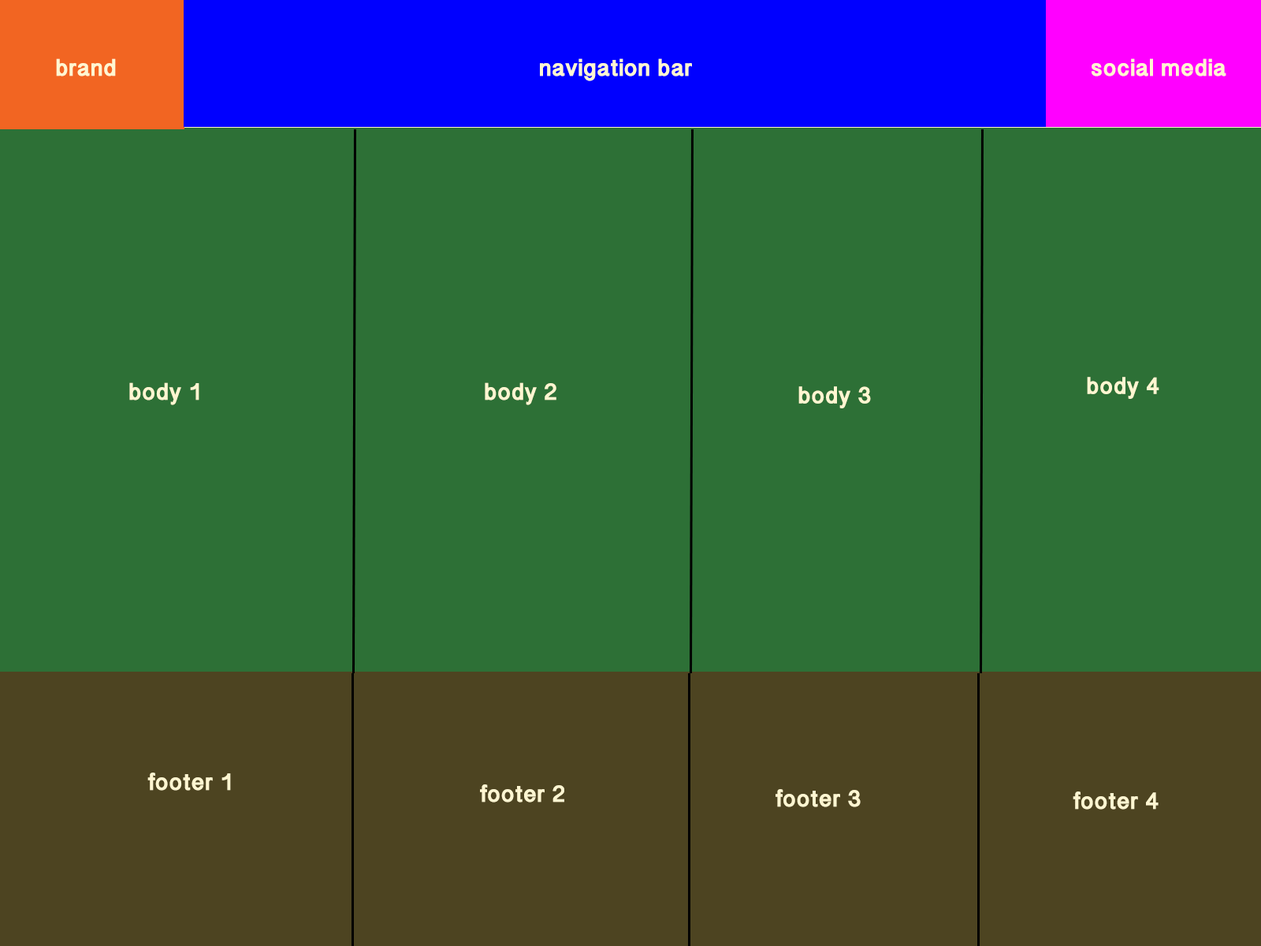
<style>
.page{position:relative;width:1261px;height:946px;background:#2d7036}
.page>*{position:absolute;margin:0}
.t1{font:24.4px "TamilSangamMN-Bold";color:#fff6d1;font-weight:bold}
</style>
<div class="page">
<p class="t1" style="left:56px;top:58px;width:60px;height:18px">brand</p>
<p class="t1" style="left:540px;top:58px;width:152px;height:23px">navigation bar</p>
<p class="t1" style="left:1091px;top:58px;width:135px;height:18px">social media</p>
<p class="t1" style="left:1087px;top:377px;width:72px;height:22px">body 4</p>
<p class="t1" style="left:129px;top:382px;width:70px;height:23px">body 1</p>
<p class="t1" style="left:485px;top:382px;width:71px;height:23px">body 2</p>
<p class="t1" style="left:798px;top:386px;width:73px;height:22px">body 3</p>
<p class="t1" style="left:147px;top:772px;width:84px;height:18px">footer 1</p>
<p class="t1" style="left:480px;top:784px;width:84px;height:18px">footer 2</p>
<p class="t1" style="left:775px;top:789px;width:86px;height:18px">footer 3</p>
<p class="t1" style="left:1073px;top:791px;width:85px;height:18px">footer 4</p>
</div>
